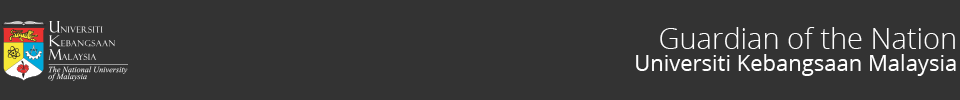
<style>
.page{position:relative;width:960px;height:100px;background:#333333}
.page>*{position:absolute;margin:0}
.t1{font:29px "OpenSans-Light";color:#ffffff}
.t2{font:22px "OpenSans";color:#ffffff}
</style>
<div class="page">
<p class="t1" style="left:660px;top:27px;width:295px;height:22px">Guardian of the Nation</p>
<p class="t2" style="left:636px;top:54px;width:320px;height:22px">Universiti Kebangsaan Malaysia</p>
</div>
